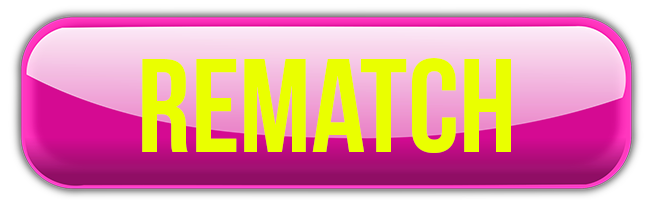
<style>
.page{position:relative;width:652px;height:200px}
.page>*{position:absolute;margin:0}
.t1{font:133px "BebasNeue";color:#eaff00}
</style>
<div class="page">
<p class="t1" style="left:142px;top:58px;width:369px;height:95px">Rematch</p>
</div>
